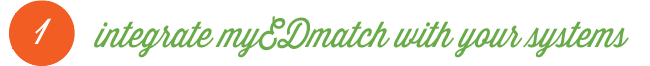
<style>
.page{position:relative;width:650px;height:66px;background:#ffffff}
.page>*{position:absolute;margin:0}
.t1{font:35.2px "ThirstyScriptRegular";color:#69aa49;font-style:italic;scale:0.91 1}
.t2{font:35.2px "ThirstyScriptRegular";color:#ffffff;font-style:italic;scale:0.91 1}
</style>
<div class="page">
<p class="t1" style="left:94px;top:16px;width:535px;height:42px">integrate myEDmatch with your systems</p>
<p class="t2" style="left:34px;top:18px;width:18px;height:26px">1</p>
</div>
